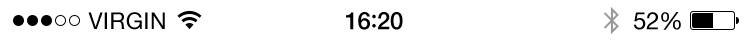
<style>
.page{position:relative;width:750px;height:40px;background:#ffffff}
.page>*{position:absolute;margin:0}
.t1{font:23px "HelveticaNeue";letter-spacing:0.02em;color:#000000}
.t2{font:24px "HelveticaNeue-Medium";letter-spacing:-0.02em;color:#000000}
.t3{font:26px "Avenir-Medium";letter-spacing:-0.02em;color:#000000}
.t4{font:24px "HelveticaNeue";letter-spacing:-0.02em;color:#000000}
</style>
<div class="page">
<p class="t1" style="left:88px;top:12px;width:77px;height:18px">VIRGIN</p>
<p class="t2" style="left:346px;top:12px;width:57px;height:18px">16<span class="t3">:</span>20</p>
<p class="t4" style="left:634px;top:12px;width:47px;height:18px">52%</p>
</div>
